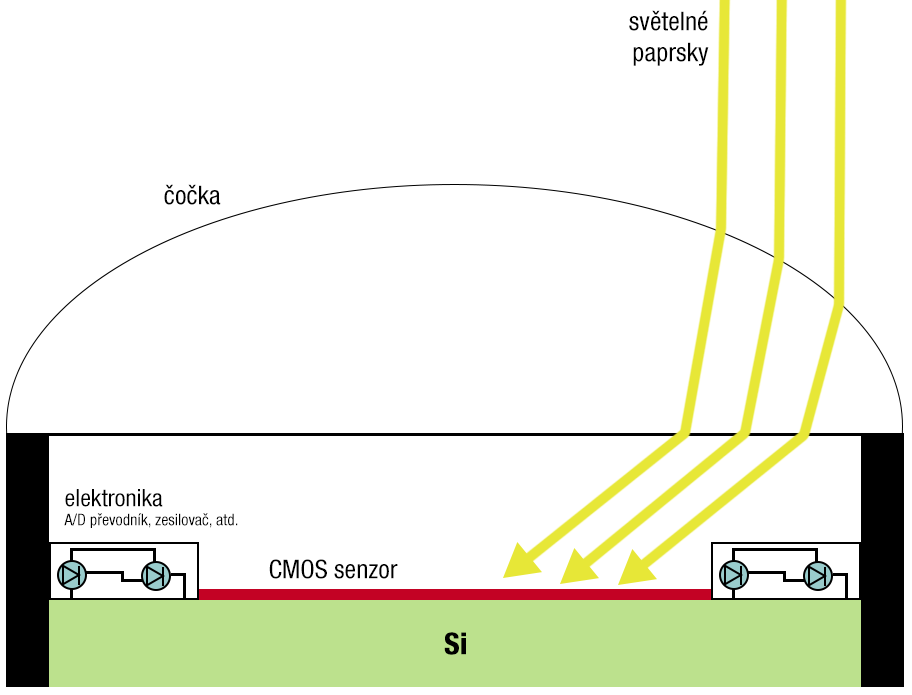
<style>
.page{position:relative;width:912px;height:695px;background:#ffffff}
.page>*{position:absolute;margin:0}
.t1{font:26px "HelveticaNeueLTPro-Cn";color:#000000}
.t2{font:16px "HelveticaNeueLTPro-Cn";color:#000000}
.t3{font:24px "HelveticaNeueLTPro-Cn";color:#000000}
.t4{font:30px "HelveticaNeueLTPro-HvCn";color:#000000}
</style>
<div class="page">
<p class="t1" style="left:629px;top:10px;width:80px;height:56px;text-align:right">světelné<br>paprsky</p>
<p class="t1" style="left:164px;top:184px;width:57px;height:21px">čočka</p>
<p class="t2" style="left:64px;top:489px;width:174px;height:39px"><span class="t3">elektronika<br></span>A/D převodník, zesilovač, atd.</p>
<p class="t1" style="left:269px;top:559px;width:129px;height:20px">CMOS senzor</p>
<p class="t4" style="left:444px;top:632px;width:22px;height:23px">Si</p>
</div>
